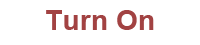
<style>
.page{position:relative;width:200px;height:45px;background:#ffffff}
.page>*{position:absolute;margin:0}
.t1{font:27.9px "Arial-BoldMT";color:#a24242}
</style>
<div class="page">
<p class="t1" style="left:46px;top:10px;width:108px;height:20px">Turn On</p>
</div>
